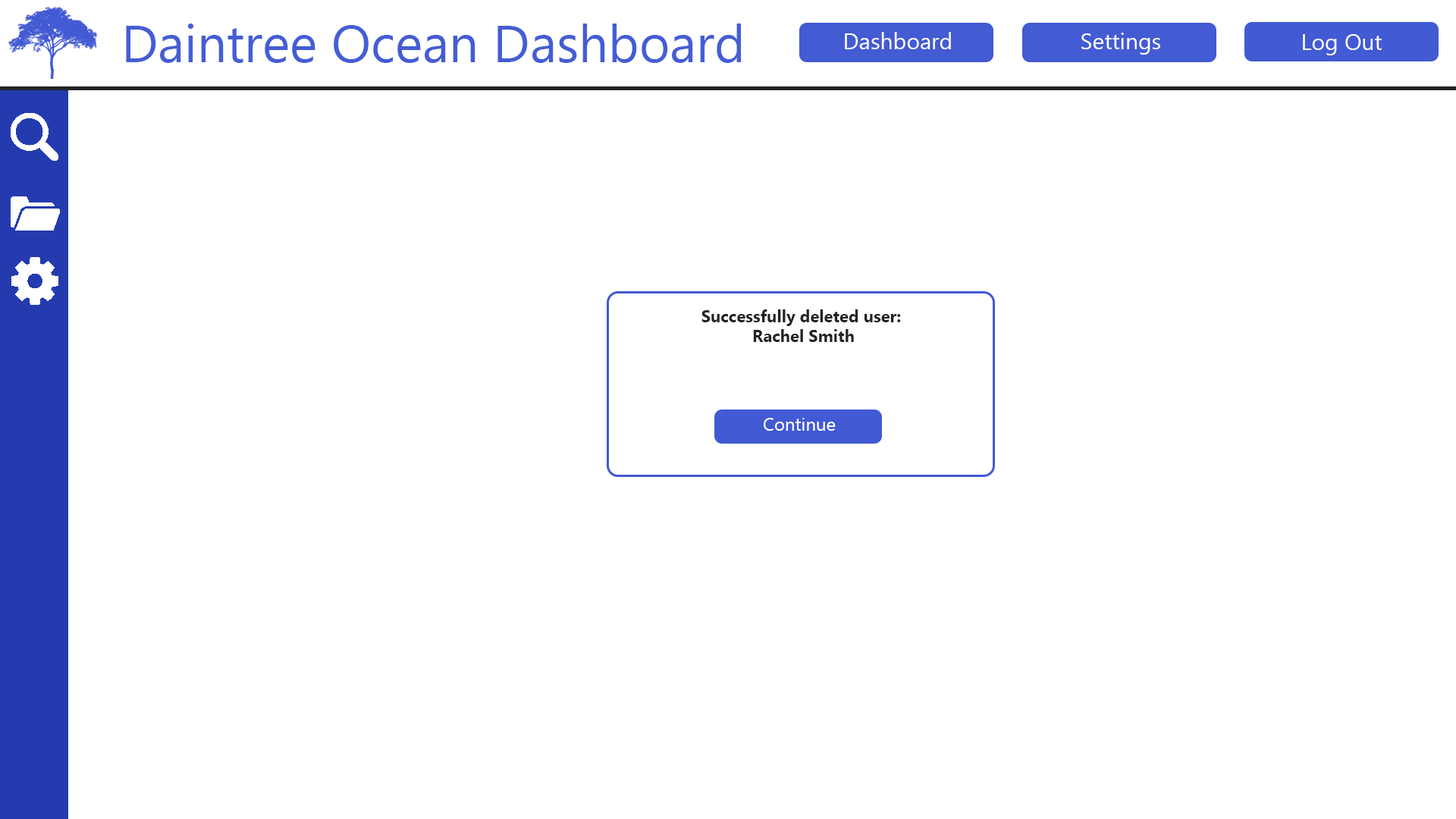
<style>
.page{position:relative;width:1456px;height:819px;background:#ffffff}
.page>*{position:absolute;margin:0}
.t1{font:52.3px "MyanmarText";color:#455dd4}
.t2{font:22.7px "MyanmarText";color:#ffffff}
.t3{font:16.7px "MyanmarText-Bold";color:#232323}
.t4{font:18.2px "MyanmarText";color:#ffffff}
</style>
<div class="page">
<p class="t1" style="left:126px;top:24px;width:615px;height:39px">Daintree Ocean Dashboard</p>
<p class="t2" style="left:845px;top:32px;width:106px;height:17px">Dashboard</p>
<p class="t2" style="left:1081px;top:33px;width:79px;height:22px">Settings</p>
<p class="t2" style="left:1303px;top:34px;width:79px;height:21px">Log Out</p>
<p class="t3" style="left:701px;top:309px;width:200px;height:33px;text-align:center">Successfully deleted user: <br>Rachel Smith</p>
<p class="t4" style="left:764px;top:418px;width:72px;height:13px">Continue</p>
</div>
